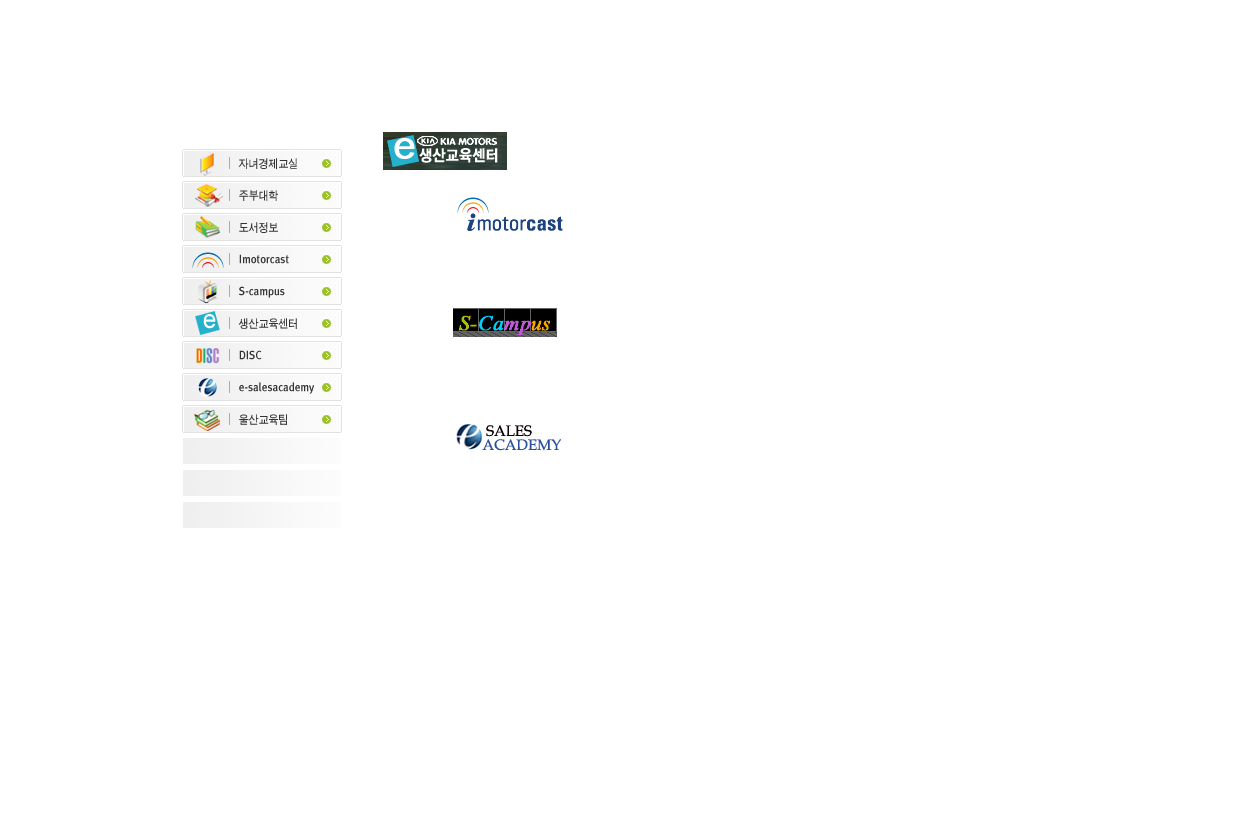
<style>
.page{position:relative;width:1240px;height:840px;background:#ffffff}
.page>*{position:absolute;margin:0}
.t1{font:12.1px/32px "SandTg";color:#333333;scale:0.91 1}
.t2{font:12.1px/32px "MetaPlusMediumRoman";color:#333333;scale:0.91 1}
.t3{font:26.4px "ArialMT";color:#ffffff;scale:0.91 1}
</style>
<div class="page">
<p class="t1" style="left:238px;top:158px;width:59px;height:267px">자녀경제교실 <br>주부대학 <br>도서정보  <br><br><br>생산교육센터 <br><br><br>울산교육팀</p>
<p class="t2" style="left:239px;top:254px;width:76px;height:140px">Imotorcast <br>S-campus <br><br>DISC<br>e-salesacademy</p>
<p class="t3" style="left:203px;top:314px;width:13px;height:15px">e</p>
</div>
